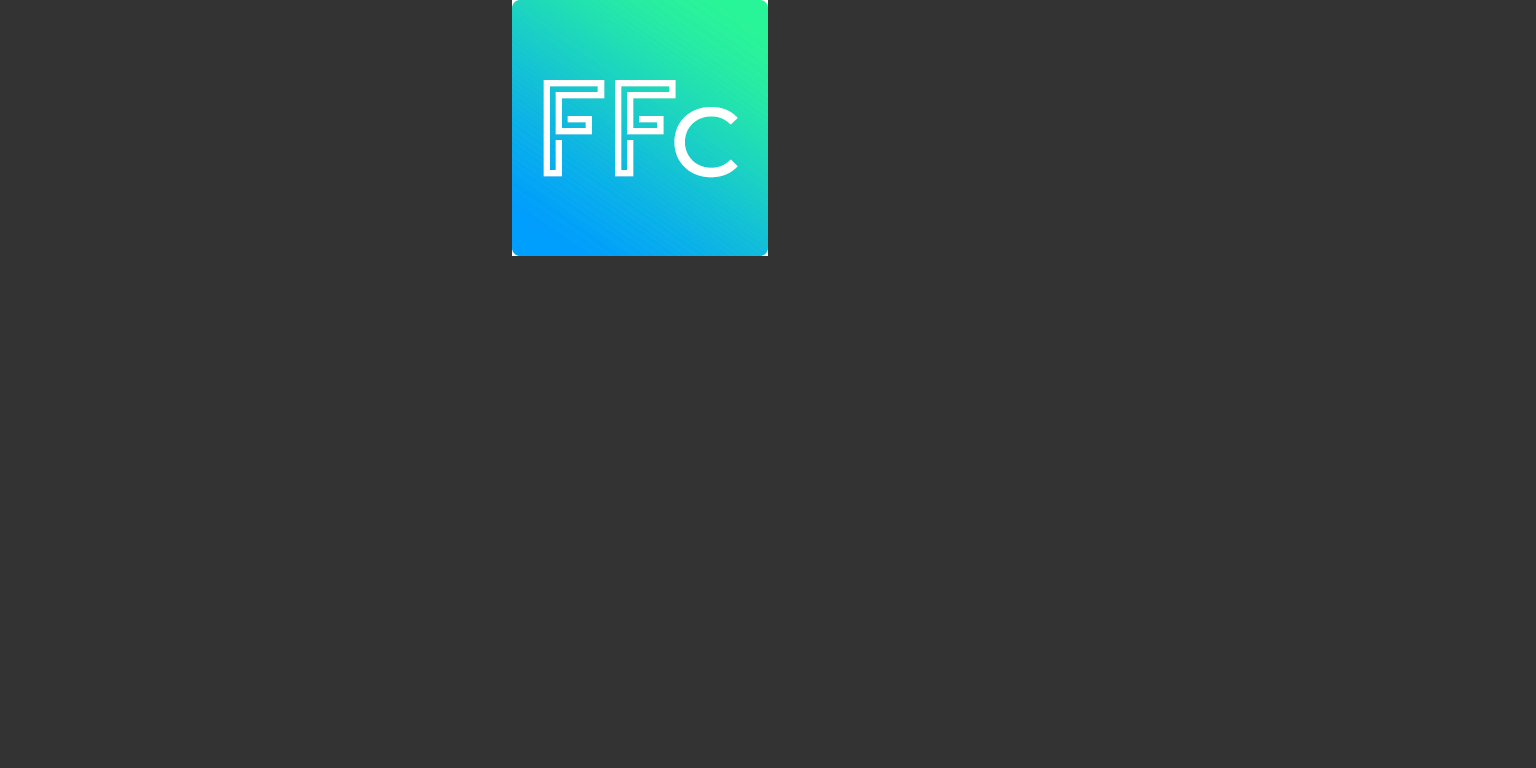
<style>
.page{position:relative;width:1536px;height:768px;background:#333333}
.page>*{position:absolute;margin:0}
.t1{font:145.8px "Continuo";color:#ffffff}
.t2{font:97.2px "Montserrat-Medium";letter-spacing:0.1em;color:#ffffff;font-weight:bold}
</style>
<div class="page">
<p class="t1" style="left:543px;top:80px;width:195px;height:98px">FF<span class="t2">C</span></p>
</div>
